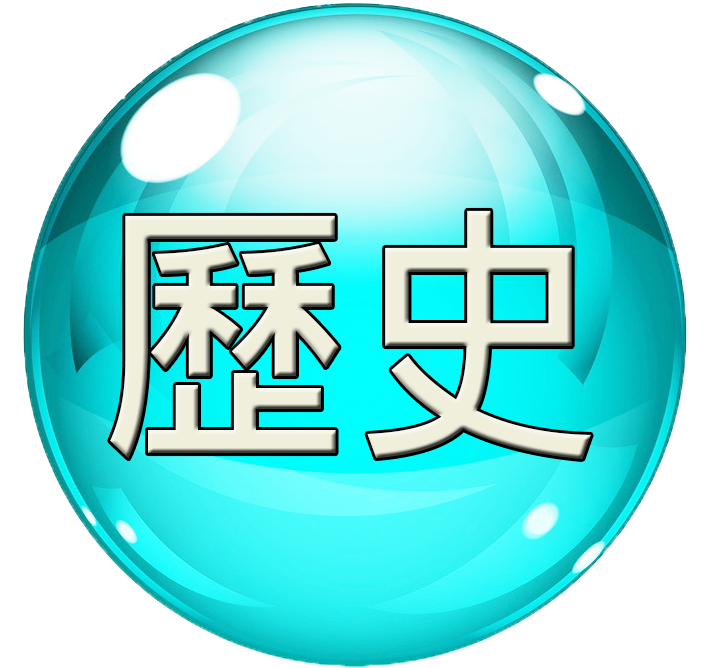
<style>
.page{position:relative;width:717px;height:668px;background:#ffffff}
.page>*{position:absolute;margin:0}
.t1{font:283.1px "MicrosoftJhengHeiBold";color:#f0efdc;scale:0.9 1}
</style>
<div class="page">
<p class="t1" style="left:110px;top:210px;width:481px;height:249px">歷史</p>
</div>
